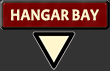
<style>
.page{position:relative;width:110px;height:71px;background:#333333}
.page>*{position:absolute;margin:0}
.t1{font:15.2px "Acme-Regular";color:#fff6cd}
</style>
<div class="page">
<p class="t1" style="left:11px;top:9px;width:88px;height:12px">HANGAR BAY</p>
</div>
